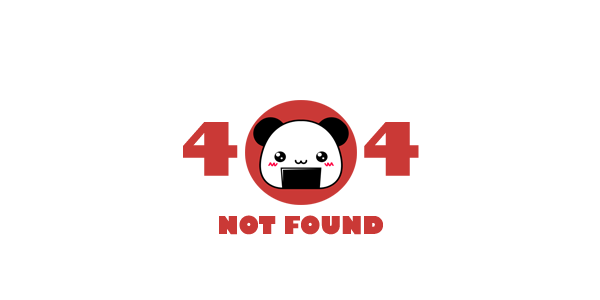
<style>
.page{position:relative;width:600px;height:300px;background:#ffffff}
.page>*{position:absolute;margin:0}
.t1{font:72px "GillSans-UltraBold";color:#ca3936}
.t2{font:24px "GillSans-UltraBold";color:#ca3936}
</style>
<div class="page">
<p class="t1" style="left:183px;top:122px;width:236px;height:54px">4     4</p>
<p class="t2" style="left:219px;top:215px;width:164px;height:20px">NOT FOUND</p>
</div>
